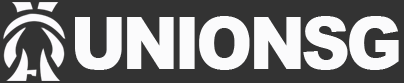
<style>
.page{position:relative;width:404px;height:83px;background:#333333}
.page>*{position:absolute;margin:0}
.t1{font:72.6px "Arial-Black";letter-spacing:-0.06em;color:#fbfbfc;scale:0.93 1}
</style>
<div class="page">
<p class="t1" style="left:75px;top:16px;width:324px;height:54px">UNIONSG</p>
</div>
